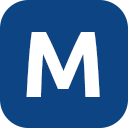
<style>
.page{position:relative;width:128px;height:128px;background:#0d4484}
.page>*{position:absolute;margin:0}
.t1{font:93.9px "Ubuntu-Bold";letter-spacing:0.01em;color:#ffffff}
</style>
<div class="page">
<p class="t1" style="left:26px;top:32px;width:74px;height:65px">M</p>
</div>
